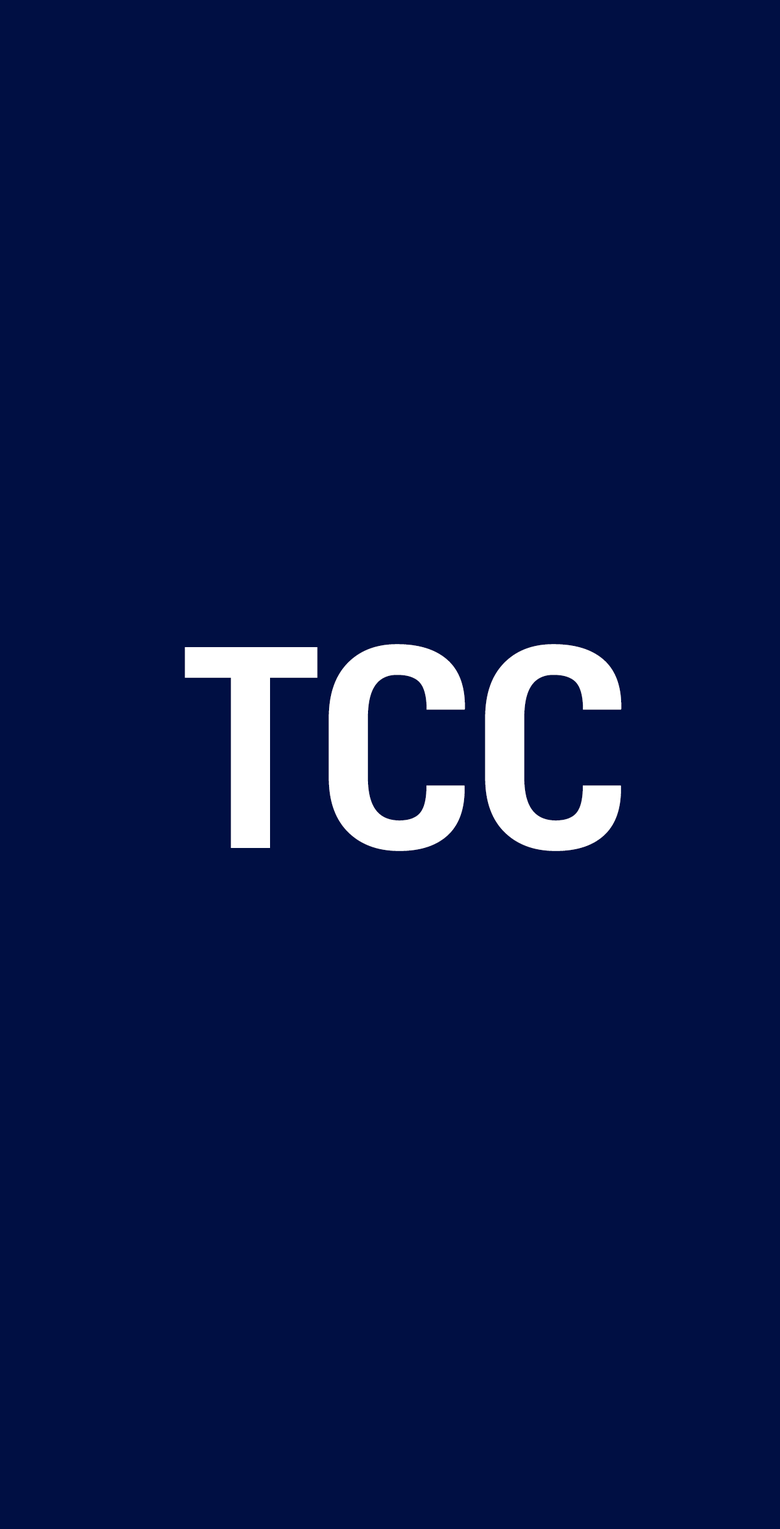
<style>
.page{position:relative;width:780px;height:1529px;background:#000f43}
.page>*{position:absolute;margin:0}
.t1{font:282.5px "Roboto-BoldCondensed";color:#ffffff}
</style>
<div class="page">
<p class="t1" style="left:185px;top:644px;width:437px;height:207px">TCC</p>
</div>
